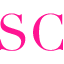
<style>
.page{position:relative;width:64px;height:64px;background:#ffffff}
.page>*{position:absolute;margin:0}
.t1{font:50px "Didot";color:#ff1493}
</style>
<div class="page">
<p class="t1" style="left:0px;top:13px;width:63px;height:38px">SC</p>
</div>
